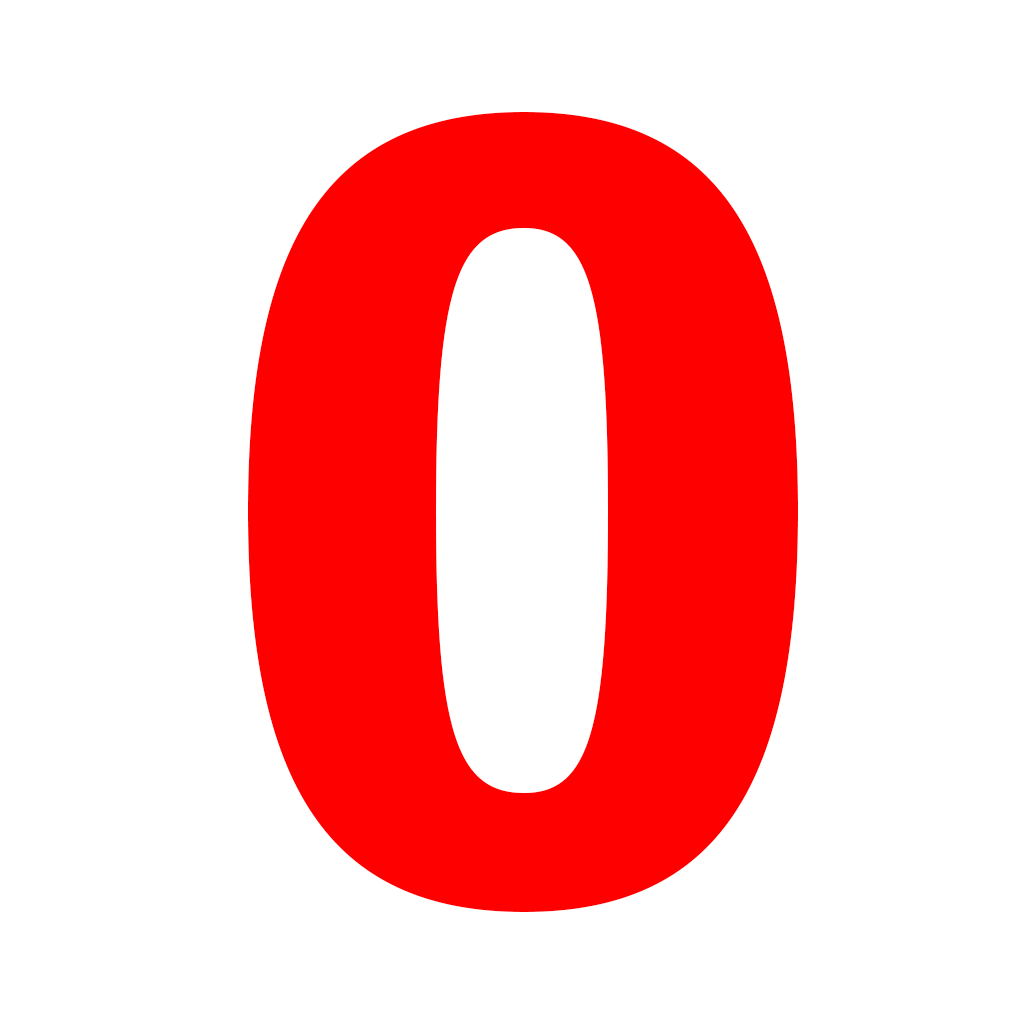
<style>
.page{position:relative;width:1024px;height:1024px;background:#ffffff}
.page>*{position:absolute;margin:0}
.t1{font:1000px "ToppanBunkyuMidashiGothicStdN-ExtraBold";color:#ff0000}
</style>
<div class="page">
<p class="t1" style="left:248px;top:112px;width:550px;height:800px">0</p>
</div>
